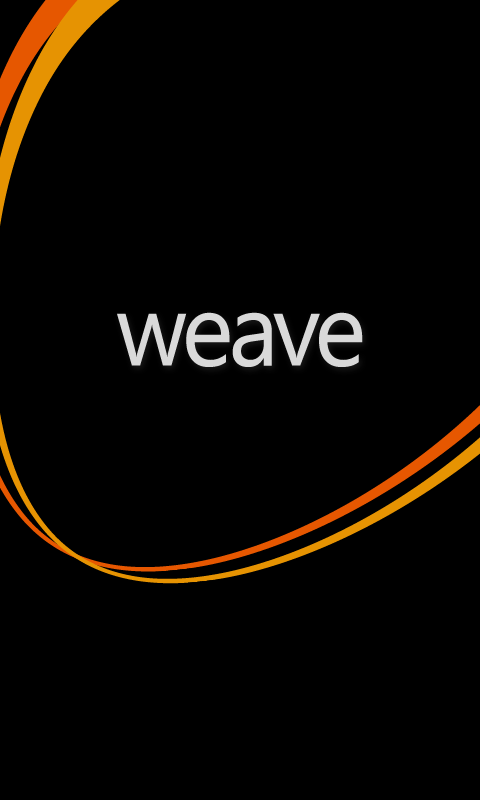
<style>
.page{position:relative;width:480px;height:800px;background:#000000}
.page>*{position:absolute;margin:0}
.t1{font:103.4px "SegoeWP";letter-spacing:-0.025em;color:#d9d9d9;scale:0.95 1}
</style>
<div class="page">
<p class="t1" style="left:117px;top:312px;width:246px;height:55px">weave</p>
</div>
